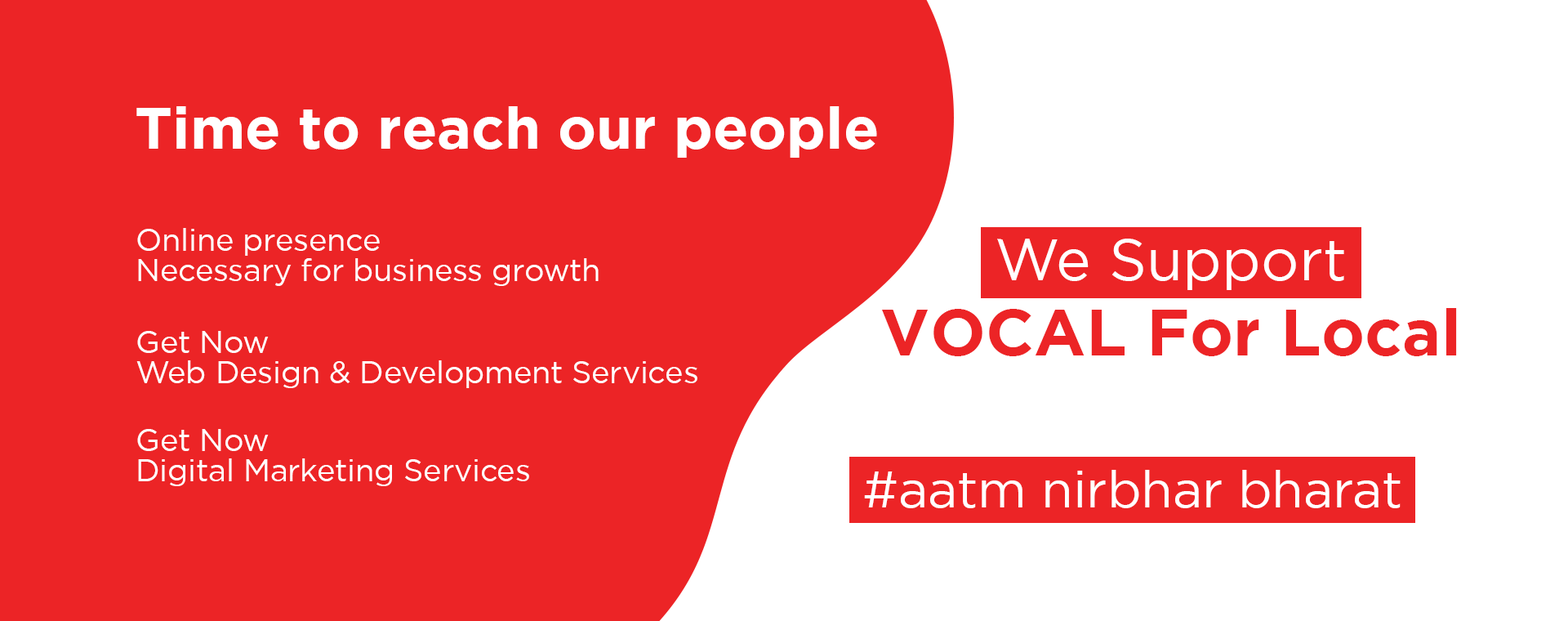
<style>
.page{position:relative;width:1568px;height:621px;background:#ec2426}
.page>*{position:absolute;margin:0}
.t1{font:57.8px "Gotham-Bold";color:#ffffff}
.t2{font:30.6px/30.6px "Gotham-Book";color:#ffffff}
.t3{font:51px "Gotham-Book";color:#ffffff}
</style>
<div class="page">
<p class="t1" style="left:136px;top:106px;width:741px;height:52px">Time to reach our people</p>
<p class="t2" style="left:137px;top:228px;width:462px;height:58px">Online presence<br>Necessary for business growth</p>
<p class="t2" style="left:136px;top:331px;width:561px;height:57px">Get Now<br>Web Design &amp; Development Services</p>
<p class="t2" style="left:137px;top:429px;width:392px;height:57px">Get Now<br>Digital Marketing Services</p>
<p class="t3" style="left:864px;top:470px;width:537px;height:38px">#aatm nirbhar bharat</p>
</div>
